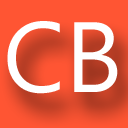
<style>
.page{position:relative;width:128px;height:128px;background:#ff5533}
.page>*{position:absolute;margin:0}
.t1{font:99.6px "SegoeUI";color:#ffffff}
</style>
<div class="page">
<p class="t1" style="left:7px;top:21px;width:111px;height:73px">CB</p>
</div>
